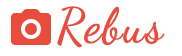
<style>
.page{position:relative;width:182px;height:56px;background:#ffffff}
.page>*{position:absolute;margin:0}
.t1{font:48px "DancingScript-Regular";letter-spacing:0.01em;color:#e84c3d;font-weight:bold}
</style>
<div class="page">
<p class="t1" style="left:57px;top:6px;width:108px;height:42px">Rebus</p>
</div>
